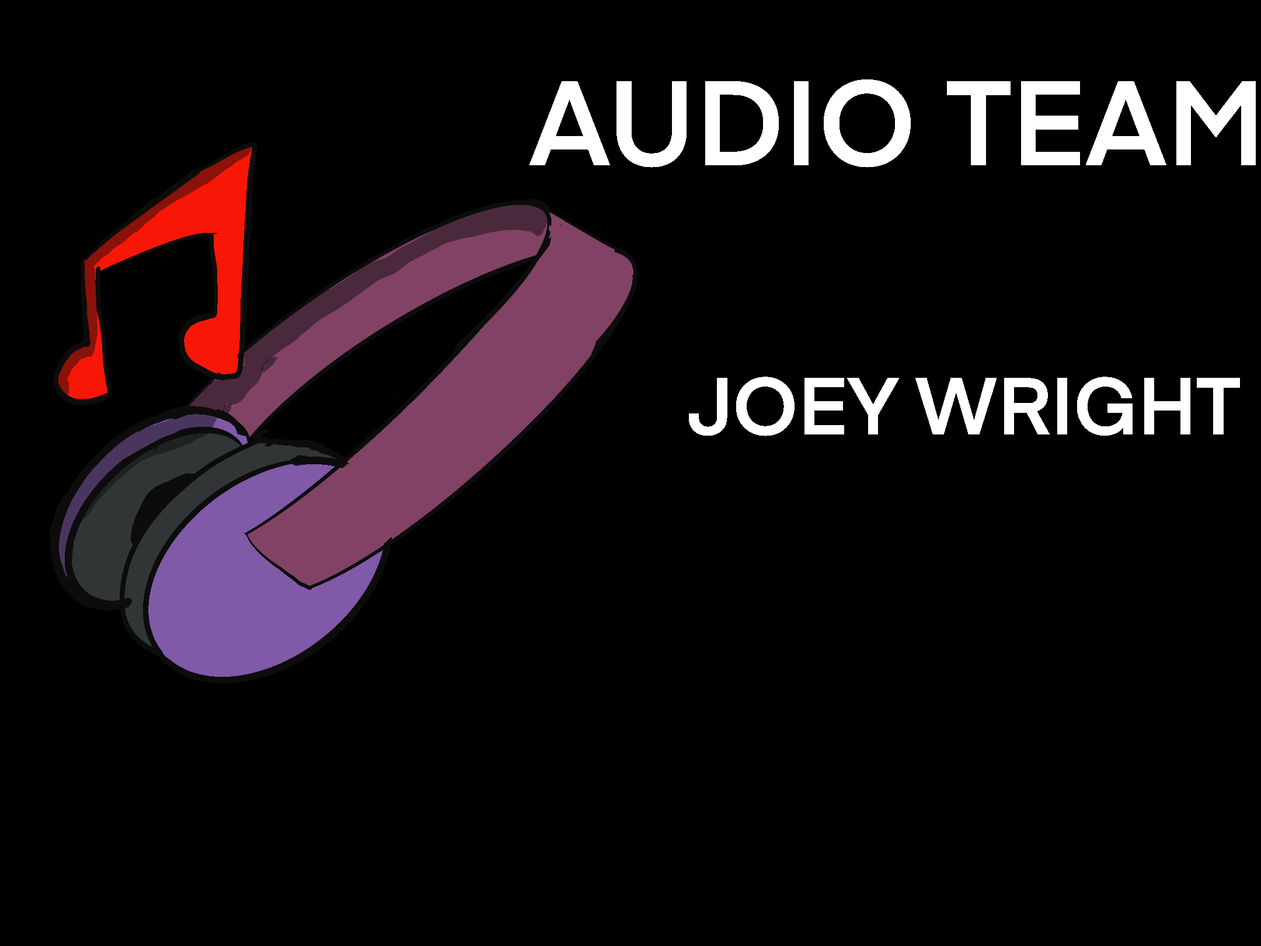
<style>
.page{position:relative;width:1261px;height:946px;background:#000000}
.page>*{position:absolute;margin:0}
.t1{font:118.1px "Eina01-SemiBold";color:#ffffff}
.t2{font:79.1px "Eina01-SemiBold";color:#ffffff}
</style>
<div class="page">
<p class="t1" style="left:0px;top:0px;width:1261px;height:946px;text-align:center">AUDIO TEAM</p>
<p class="t2" style="left:0px;top:0px;width:1261px;height:946px;text-align:center">JOEY WRIGHT</p>
</div>
